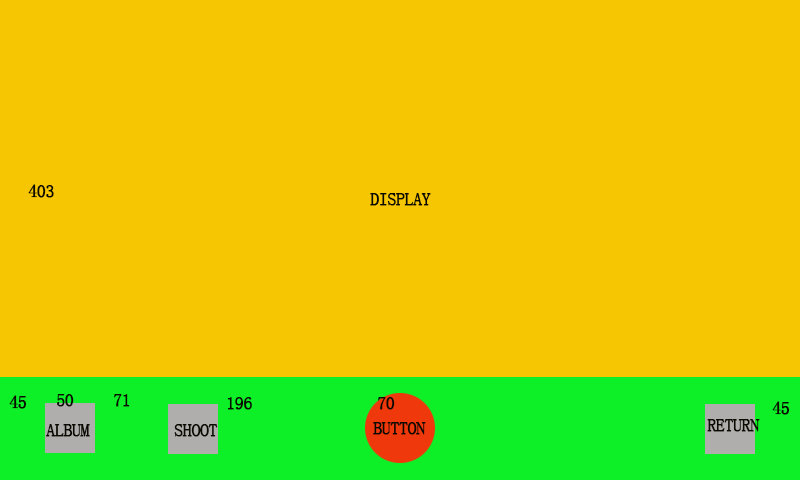
<style>
.page{position:relative;width:800px;height:480px;background:#f7c602}
.page>*{position:absolute;margin:0}
.t1{font:18px "SimSun";letter-spacing:-0.05em;color:#0a0a01;text-transform:uppercase;font-weight:bold}
</style>
<div class="page">
<p class="t1" style="left:28px;top:184px;width:26px;height:14px">403</p>
<p class="t1" style="left:370px;top:193px;width:61px;height:13px">DISPLAY</p>
<p class="t1" style="left:9px;top:395px;width:17px;height:14px">45</p>
<p class="t1" style="left:57px;top:394px;width:17px;height:13px">50</p>
<p class="t1" style="left:114px;top:394px;width:16px;height:13px">71</p>
<p class="t1" style="left:227px;top:397px;width:25px;height:13px">196</p>
<p class="t1" style="left:378px;top:397px;width:17px;height:13px">70</p>
<p class="t1" style="left:772px;top:401px;width:17px;height:14px">45</p>
<p class="t1" style="left:46px;top:424px;width:44px;height:13px">Album</p>
<p class="t1" style="left:174px;top:424px;width:44px;height:13px">SHOOT</p>
<p class="t1" style="left:373px;top:422px;width:53px;height:13px">BUTTON</p>
<p class="t1" style="left:707px;top:419px;width:53px;height:13px">RETURN</p>
</div>
